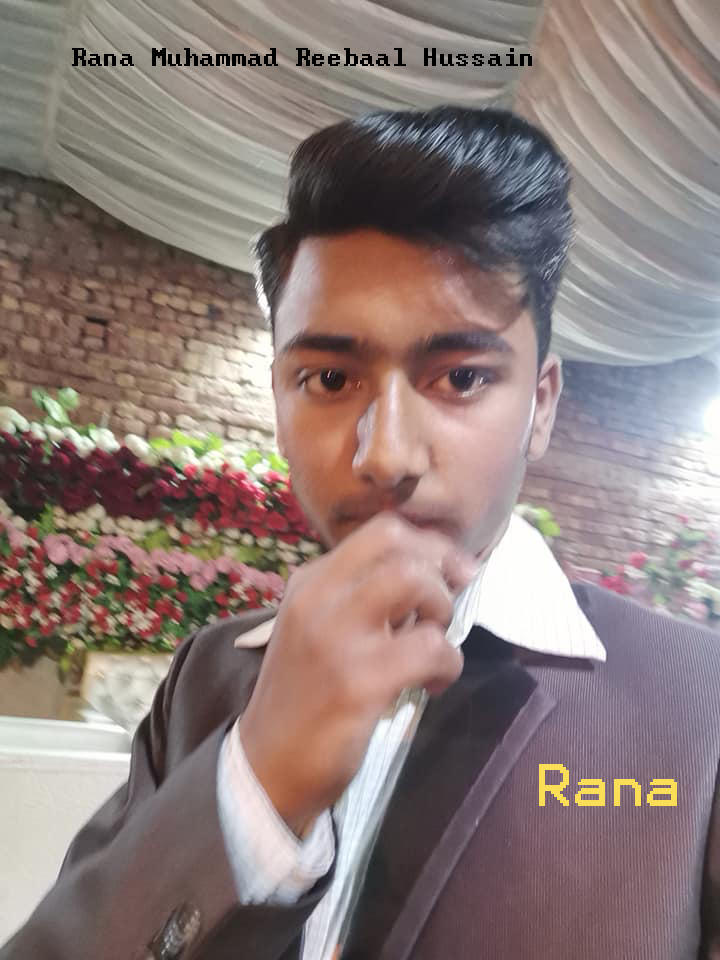
<style>
.page{position:relative;width:720px;height:960px}
.page>*{position:absolute;margin:0}
.t1{font:30px "Terminal";color:#000000}
.t2{font:48px "Terminal";color:#fade58}
.t3{font:30px "Terminal";color:#fade58}
</style>
<div class="page">
<p class="t1" style="left:72px;top:48px;width:460px;height:18px">Rana Muhammad Reebaal Hussain</p>
<p class="t2" style="left:539px;top:764px;width:138px;height:42px"><span class="t3"><br><br><br><br><br><br><br><br><br><br><br><br><br><br><br><br><br><br><br></span>Rana</p>
</div>
